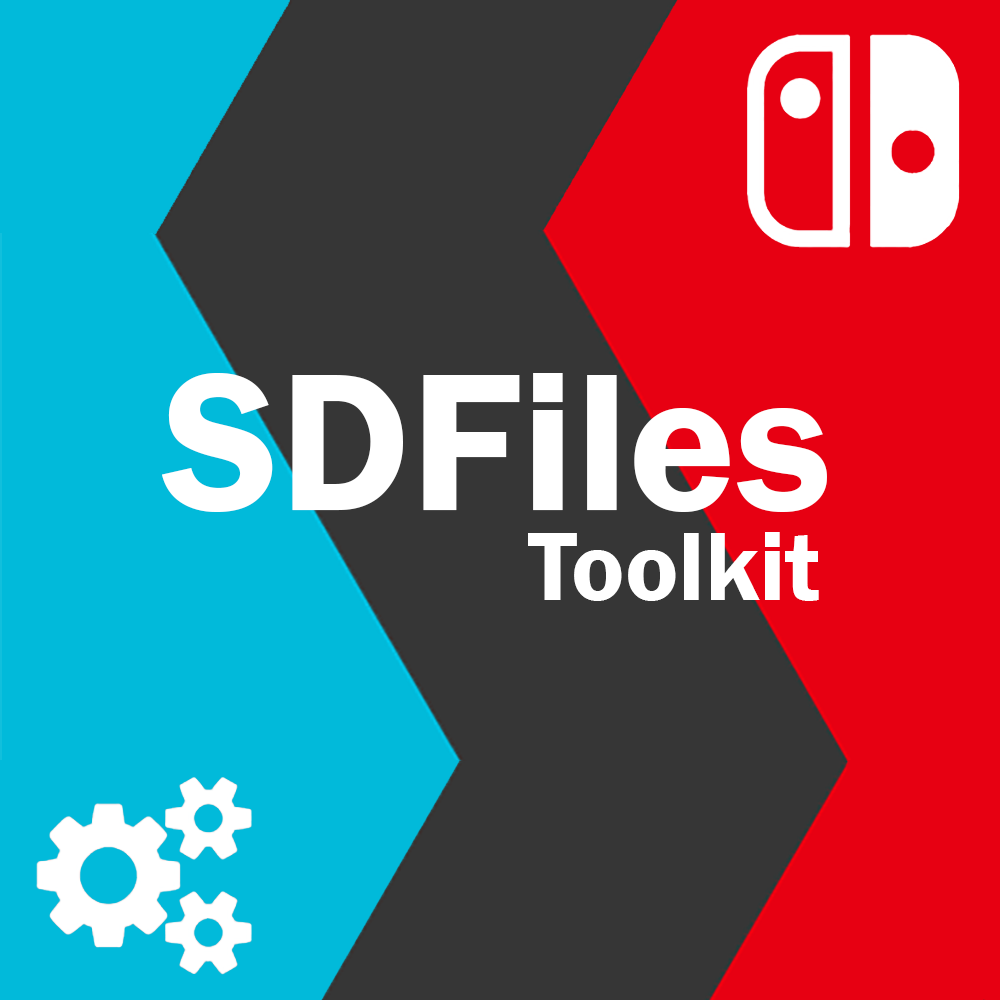
<style>
.page{position:relative;width:1000px;height:1000px;background:#363636}
.page>*{position:absolute;margin:0}
.t1{font:201.5px "FranklinGothic-Demi";color:#ffffff}
.t2{font:99.8px "FranklinGothic-Demi";color:#ffffff}
</style>
<div class="page">
<p class="t1" style="left:162px;top:373px;width:665px;height:139px">SDFiles</p>
<p class="t2" style="left:528px;top:532px;width:291px;height:69px">Toolkit</p>
</div>
